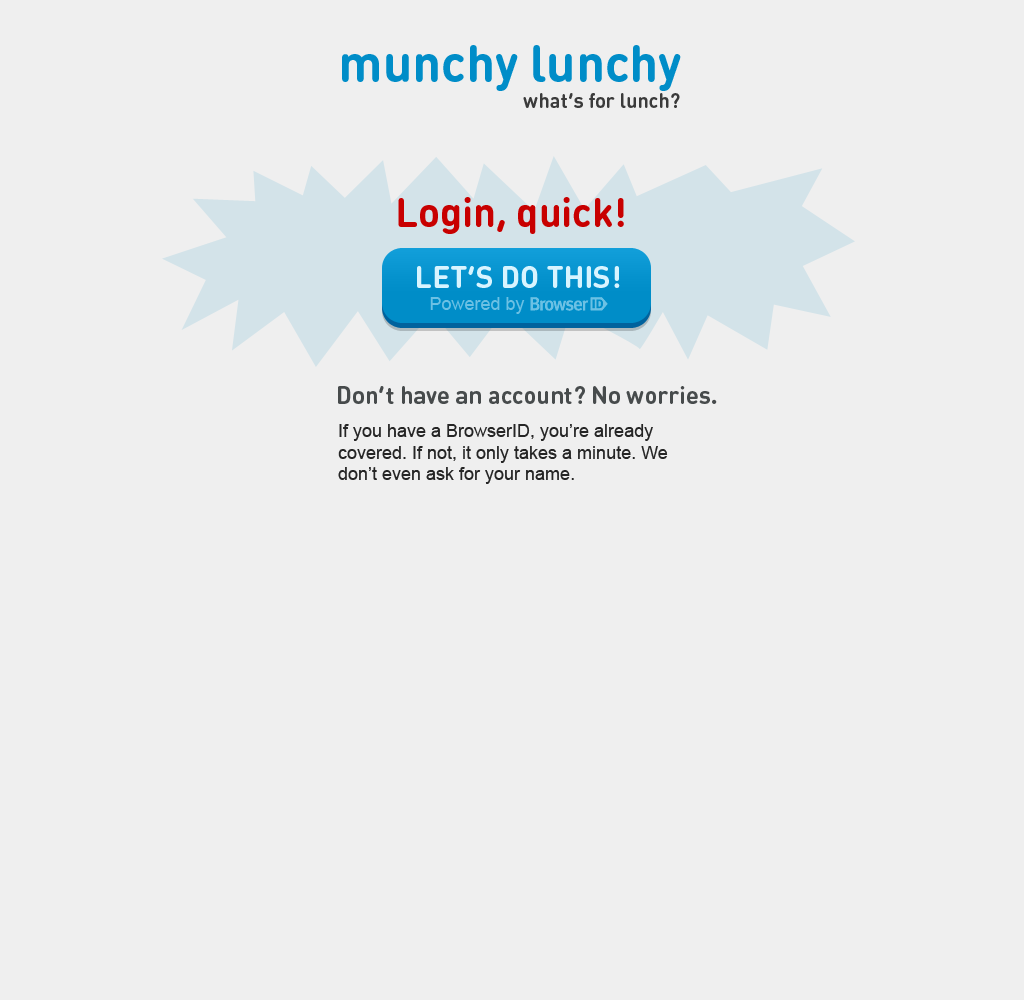
<style>
.page{position:relative;width:1024px;height:1000px;background:#efefef}
.page>*{position:absolute;margin:0}
.t1{font:51px "DINRoundOT-Bold";color:#008dc8}
.t2{font:20px "DINRoundOT-Bold";color:#3b3b3b}
.t3{font:40px "DINRoundOT-Bold";color:#c80000}
.t4{font:30px "DINRoundOT-Bold";color:#d8f4ff}
.t5{font:18px "ArialMT";color:#6cc1e4}
.t6{font:24px "DINRoundOT-Bold";color:#474b4c}
.t7{font:18px "ArialMT";color:#252525}
</style>
<div class="page">
<p class="t1" style="left:342px;top:45px;width:339px;height:46px">munchy lunchy</p>
<p class="t2" style="left:523px;top:93px;width:157px;height:15px">what’s for lunch?</p>
<p class="t3" style="left:398px;top:197px;width:226px;height:37px">Login, quick!</p>
<p class="t4" style="left:417px;top:266px;width:203px;height:22px">LET’S DO THIS!</p>
<p class="t5" style="left:430px;top:297px;width:95px;height:17px">Powered by</p>
<p class="t6" style="left:338px;top:386px;width:379px;height:18px">Don’t have an account? No worries.</p>
<p class="t7" style="left:338px;top:424px;width:330px;height:60px">If you have a BrowserID, you’re already<br>covered. If not, it only takes a minute. We<br>don’t even ask for your name.</p>
</div>
